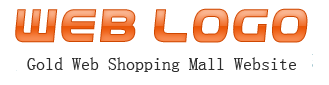
<style>
.page{position:relative;width:329px;height:85px;background:#ffffff}
.page>*{position:absolute;margin:0}
.t1{font:18px "SimSun";color:#2e2e2e}
</style>
<div class="page">
<p class="t1" style="left:27px;top:55px;width:270px;height:18px">Gold Web Shopping Mall Website</p>
</div>
